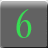
<style>
.page{position:relative;width:48px;height:48px;background:#626262}
.page>*{position:absolute;margin:0}
.t1{font:46.9px "NuevaStd-Cond";color:#39de54}
</style>
<div class="page">
<p class="t1" style="left:16px;top:9px;width:16px;height:29px">6</p>
</div>
